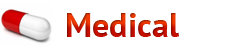
<style>
.page{position:relative;width:226px;height:53px;background:#ffffff}
.page>*{position:absolute;margin:0}
.t1{font:34px "PTSans-Bold"}
</style>
<div class="page">
<p class="t1" style="left:67px;top:13px;width:112px;height:24px">Medical</p>
</div>
